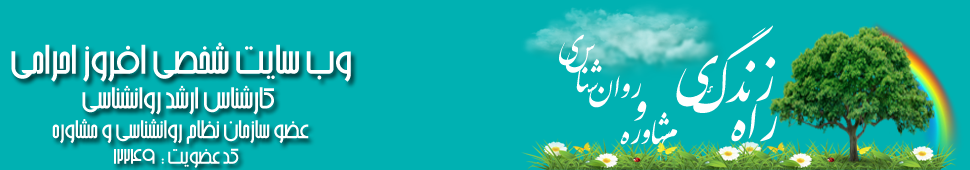
<style>
.page{position:relative;width:970px;height:170px;background:#00b1b2}
.page>*{position:absolute;margin:0}
.t1{font:60px "IranNastaliq";color:#ffffff}
.t2{font:36px "IranNastaliq";color:#ffffff}
.t3{font:52px "BArshia";color:#ffffff}
.t4{font:38px "BArshia";color:#ffffff}
.t5{font:48px "IranNastaliq";color:#ffffff}
.t6{font:32px "BArshia";color:#ffffff}
.t7{font:28px "BArshia";color:#ffffff}
</style>
<div class="page">
<p class="t1" style="left:693px;top:25px;width:80px;height:88px">گ</p>
<p class="t2" style="left:559px;top:34px;width:25px;height:32px">ي</p>
<p class="t3" style="left:11px;top:42px;width:340px;height:40px">وب سايت شخصي افروز احرامي</p>
<p class="t2" style="left:565px;top:43px;width:30px;height:30px">س</p>
<p class="t2" style="left:576px;top:59px;width:26px;height:34px">شنا</p>
<p class="t1" style="left:676px;top:55px;width:43px;height:52px">ي</p>
<p class="t1" style="left:725px;top:56px;width:51px;height:47px">زند</p>
<p class="t2" style="left:589px;top:75px;width:52px;height:33px">روان</p>
<p class="t4" style="left:82px;top:85px;width:192px;height:30px">کارشناس ارشد روانشناسي</p>
<p class="t5" style="left:634px;top:101px;width:13px;height:20px">و</p>
<p class="t2" style="left:620px;top:112px;width:50px;height:33px">شاوره</p>
<p class="t1" style="left:731px;top:103px;width:46px;height:39px">راه</p>
<p class="t6" style="left:52px;top:119px;width:257px;height:25px">عضو سازمان نظام روانشناسي و مشاوره</p>
<p class="t2" style="left:660px;top:129px;width:18px;height:36px">م</p>
<p class="t7" style="left:114px;top:148px;width:125px;height:20px">کد عضويت :  12249</p>
</div>
